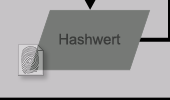
<style>
.page{position:relative;width:170px;height:100px;background:#c6c3c6}
.page>*{position:absolute;margin:0}
.t1{font:14.7px "ArialMT";color:#3b3c3b}
</style>
<div class="page">
<p class="t1" style="left:59px;top:33px;width:62px;height:12px">Hashwert</p>
</div>
